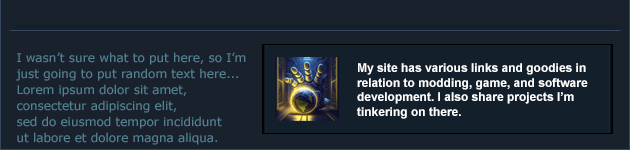
<style>
.page{position:relative;width:630px;height:150px;background:#19222c}
.page>*{position:absolute;margin:0}
.t1{font:12px/16px "Verdana";color:#538092}
.t2{font:12px "Arial-BoldMT";color:#ffffff}
</style>
<div class="page">
<p class="t1" style="left:16px;top:52px;width:230px;height:93px">I wasn’t sure what to put here, so I’m<br>just going to put random text here...<br>Lorem ipsum dolor sit amet, <br>consectetur adipiscing elit,<br>sed do eiusmod tempor incididunt<br>ut labore et dolore magna aliqua.</p>
<p class="t2" style="left:357px;top:63px;width:231px;height:56px">My site has various links and goodies in relation to modding, game, and software development. I also share projects I’m tinkering on there.</p>
</div>
